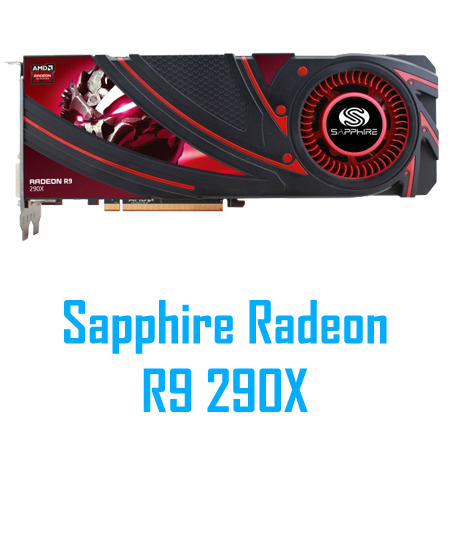
<style>
.page{position:relative;width:450px;height:550px;background:#ffffff}
.page>*{position:absolute;margin:0}
.t1{font:57px "AgencyFB-Bold";color:#02acfe}
</style>
<div class="page">
<p class="t1" style="left:64px;top:300px;width:323px;height:112px;text-align:center">Sapphire Radeon <br>R9 290X</p>
</div>
